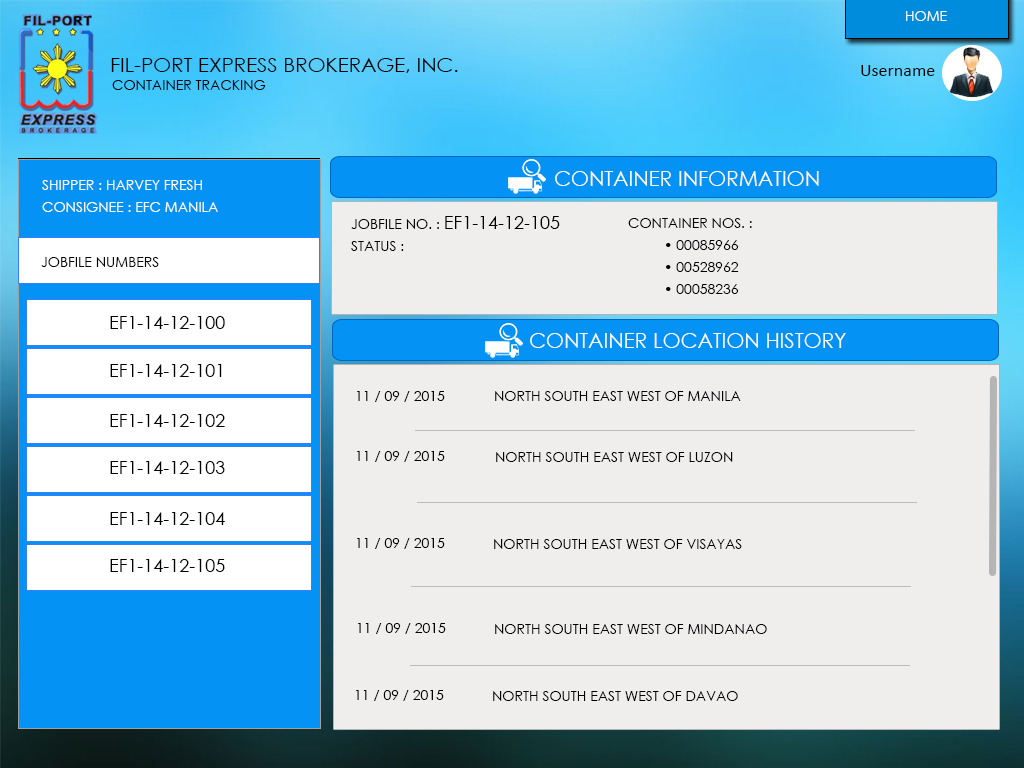
<style>
.page{position:relative;width:1024px;height:768px;background:#f0eded}
.page>*{position:absolute;margin:0}
.t1{font:14px "CenturyGothic";color:#ffffff;text-transform:uppercase}
.t2{font:20.3px "CenturyGothic";color:#000000;text-transform:uppercase}
.t3{font:18px/30.5px "Calibri";color:#000000}
.t4{font:14px "CenturyGothic";color:#000000;text-transform:uppercase}
.t5{font:20.8px "CenturyGothic";color:#ffffff;text-transform:uppercase}
.t6{font:14px/22px "CenturyGothic";color:#ffffff;text-transform:uppercase}
.t7{font:14px/22px "CenturyGothic";color:#000000;text-transform:uppercase}
.t8{font:18px/3px "CenturyGothic";color:#000000;text-transform:uppercase}
.t9{font:18px/16px "CenturyGothic";color:#000000;text-transform:uppercase}
.t10{font:18px/25px "CenturyGothic";color:#000000;text-transform:uppercase}
.t11{font:18px/7px "CenturyGothic";color:#000000;text-transform:uppercase}
</style>
<div class="page">
<p class="t1" style="left:906px;top:11px;width:41px;height:10px">Home</p>
<p class="t2" style="left:111px;top:58px;width:347px;height:15px">FIL-PORT EXPRESS BROKERAGE, INC.</p>
<p class="t3" style="left:861px;top:65px;width:74px;height:11px">Username<br>vvvvv</p>
<p class="t4" style="left:112px;top:80px;width:154px;height:10px">Container Tracking</p>
<p class="t5" style="left:555px;top:171px;width:264px;height:15px">Container Information</p>
<p class="t6" style="left:42px;top:180px;width:176px;height:32px">Shipper : Harvey Fresh <br>Consignee : EFC Manila</p>
<p class="t7" style="left:351px;top:216px;width:209px;height:35px">Jobfile no. : <span class="t8">ef1-14-12-105<br></span>Status :</p>
<p class="t7" style="left:628px;top:218px;width:124px;height:76px">Container Nos. :<br> • 00085966<br> • 00528962<br> • 00058236</p>
<p class="t4" style="left:41px;top:257px;width:118px;height:10px">Jobfile numbers</p>
<p class="t9" style="left:110px;top:316px;width:115px;height:256px">ef1-14-12-100<br><br><br>ef1-14-12-101<br><br><span class="t10">ef1-14-12-102<br><br>ef1-14-12-103<br><br><br></span><span class="t11">ef1-14-12-104<br><br><br></span><span class="t8">ef1-14-12-105</span></p>
<p class="t5" style="left:530px;top:333px;width:316px;height:15px">Container Location History</p>
<p class="t4" style="left:357px;top:391px;width:88px;height:11px">11 / 09 / 2015</p>
<p class="t4" style="left:495px;top:391px;width:246px;height:10px">North South east west of manila</p>
<p class="t4" style="left:357px;top:451px;width:88px;height:11px">11 / 09 / 2015</p>
<p class="t4" style="left:496px;top:452px;width:237px;height:10px">North South east west of Luzon</p>
<p class="t4" style="left:357px;top:538px;width:88px;height:11px">11 / 09 / 2015</p>
<p class="t4" style="left:494px;top:539px;width:248px;height:10px">North South east west of Visayas</p>
<p class="t4" style="left:358px;top:623px;width:88px;height:11px">11 / 09 / 2015</p>
<p class="t4" style="left:495px;top:624px;width:272px;height:10px">North South east west of Mindanao</p>
<p class="t4" style="left:356px;top:690px;width:88px;height:11px">11 / 09 / 2015</p>
<p class="t4" style="left:493px;top:691px;width:245px;height:10px">North South east west of Davao</p>
</div>
